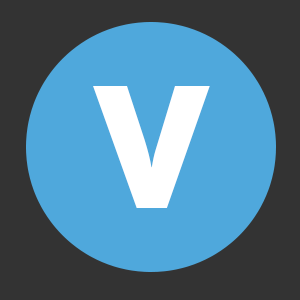
<style>
.page{position:relative;width:300px;height:300px;background:#4fa8dc}
.page>*{position:absolute;margin:0}
.t1{font:187.3px "TwCenMT-CondensedExtraBold";color:#ffffff;scale:1.17 1}
</style>
<div class="page">
<p class="t1" style="left:93px;top:86px;width:117px;height:122px">V</p>
</div>
